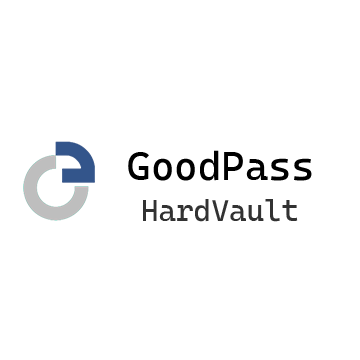
<style>
.page{position:relative;width:360px;height:360px;background:#ffffff}
.page>*{position:absolute;margin:0}
.t1{font:40px "CascadiaCode-Roman";color:#000000}
.t2{font:30px "CascadiaCode-Roman";color:#323232}
</style>
<div class="page">
<p class="t1" style="left:128px;top:150px;width:184px;height:31px">GoodPass</p>
<p class="t2" style="left:143px;top:199px;width:155px;height:23px">HardVault</p>
</div>
